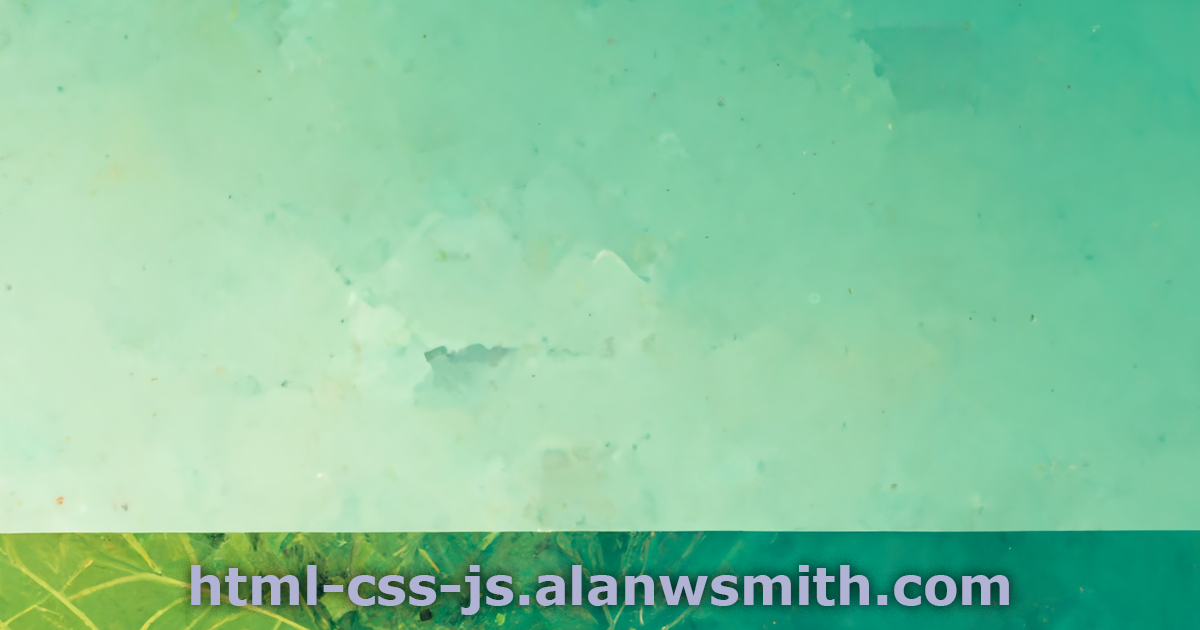
<style>
.page{position:relative;width:1200px;height:630px}
.page>*{position:absolute;margin:0}
.t1{font:52px "Verdana-Bold";color:#b0b3d4}
</style>
<div class="page">
<p class="t1" style="left:191px;top:565px;width:818px;height:50px">html-css-js.alanwsmith.com</p>
</div>
